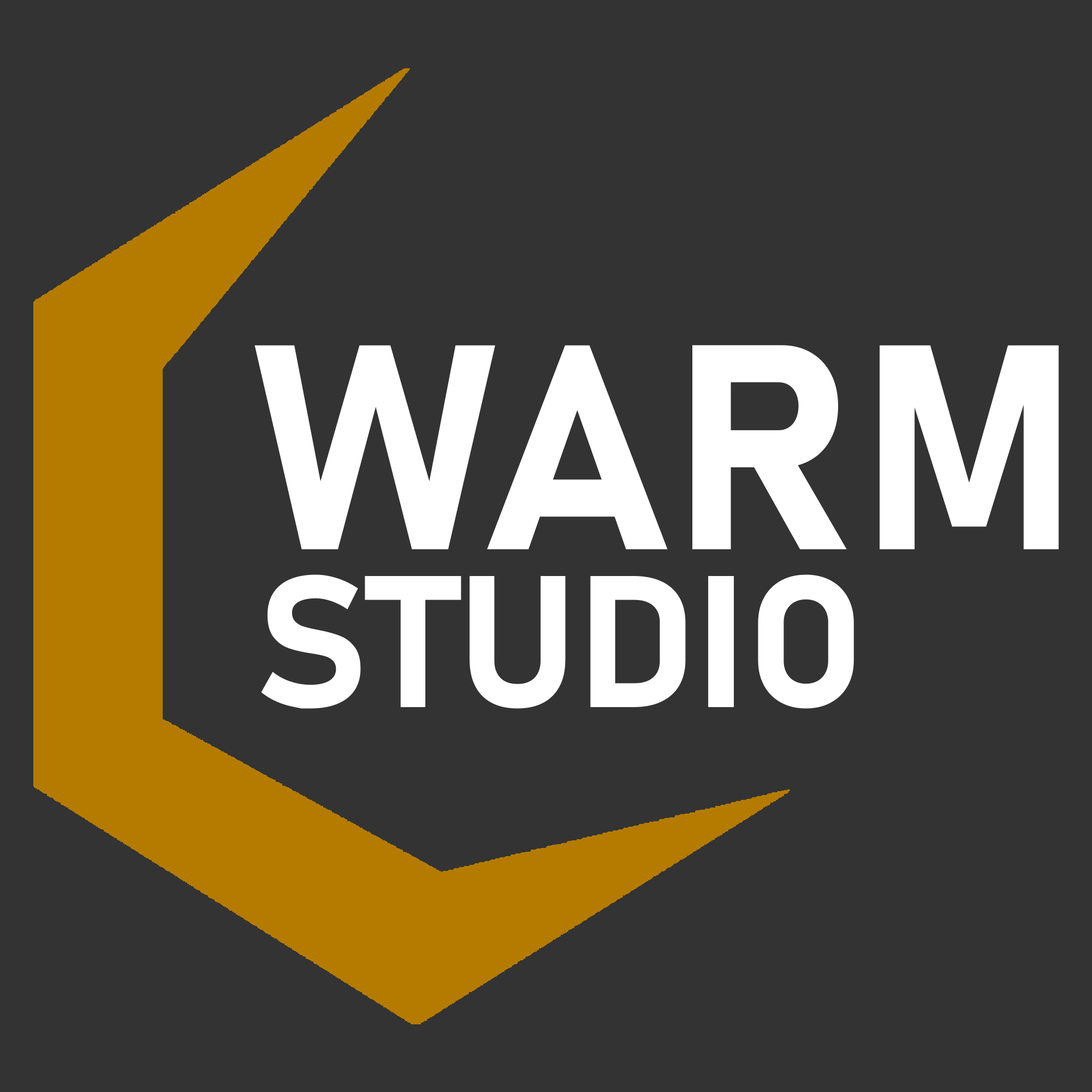
<style>
.page{position:relative;width:1092px;height:1092px;background:#333333}
.page>*{position:absolute;margin:0}
.t1{font:287.1px "Bahnschrift-Bold";color:#ffffff}
.t2{font:184.5px "Bahnschrift-Bold";color:#ffffff}
</style>
<div class="page">
<p class="t1" style="left:254px;top:345px;width:805px;height:204px">WARM</p>
<p class="t2" style="left:261px;top:574px;width:593px;height:135px">STUDIO</p>
</div>
